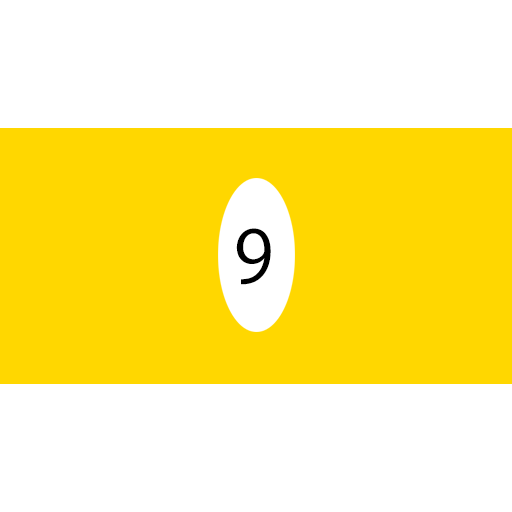
<style>
.page{position:relative;width:512px;height:512px;background:#ffffff}
.page>*{position:absolute;margin:0}
.t1{font:72px "KozGoPr6N-Regular";letter-spacing:0.14em;color:#000000}
</style>
<div class="page">
<p class="t1" style="left:236px;top:228px;width:35px;height:57px">9</p>
</div>
